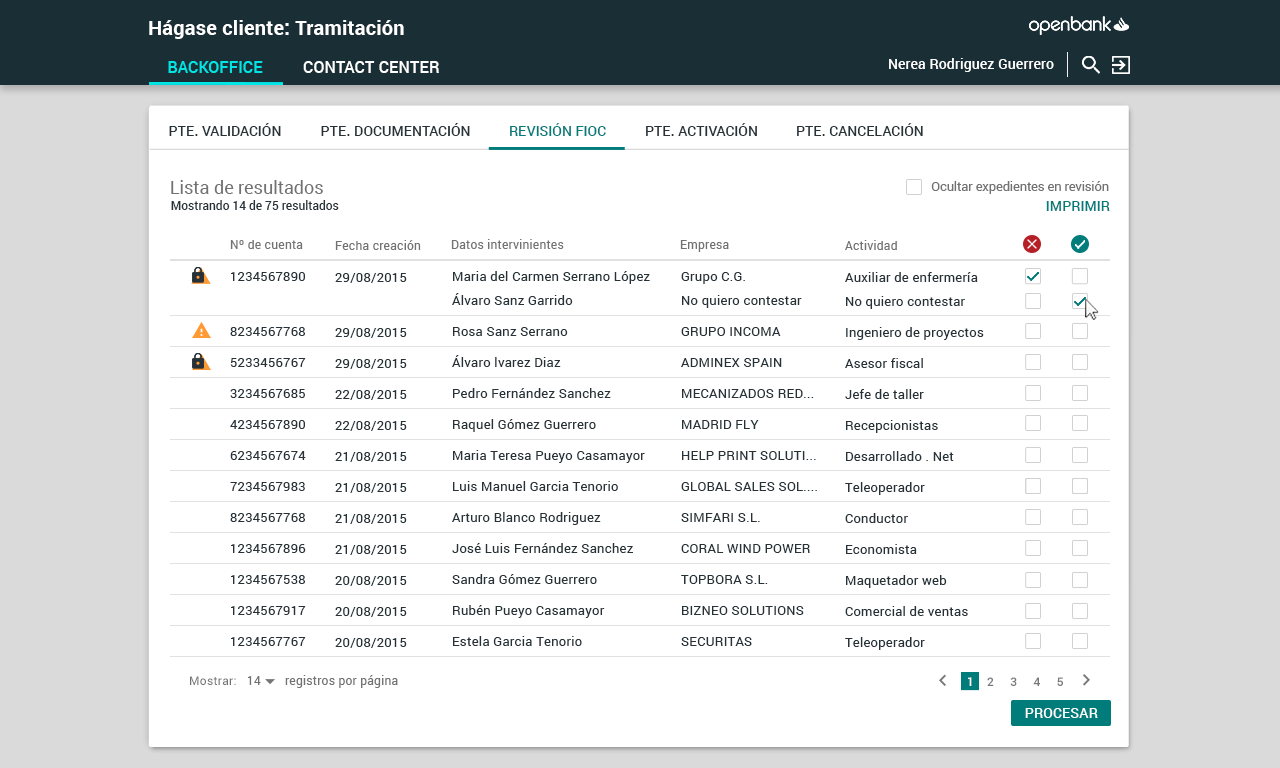
<style>
.page{position:relative;width:1280px;height:768px;background:#ffffff}
.page>*{position:absolute;margin:0}
.t1{font:20px "Roboto-Bold";letter-spacing:0.01em;color:#ffffff}
.t2{font:16px "Roboto-Medium";letter-spacing:0.01em;color:#00e6e6}
.t3{font:16px "Roboto-Medium";letter-spacing:0.01em;color:#ffffff}
.t4{font:14px "Roboto-Medium";letter-spacing:0.01em;color:#ffffff}
.t5{font:14px "Roboto-Medium";letter-spacing:0.01em;color:#263238}
.t6{font:14px "Roboto-Medium";letter-spacing:0.01em;color:#007c7b}
.t7{font:18px "Roboto-Regular";color:#727272}
.t8{font:13px "Roboto-Regular";color:#727272}
.t9{font:12px "Roboto-Medium";color:#263238}
.t10{font:14.2px "Roboto-Medium";letter-spacing:0.01em;color:#007c7b}
.t11{font:12px "Roboto-Regular";letter-spacing:0.02em;color:#727272}
.t12{font:13px/31px "Roboto-Regular";letter-spacing:0.02em;color:#263238}
.t13{font:13px/30.9px "Roboto-Regular";letter-spacing:0.02em;color:#263238}
.t14{font:13px/24px "Roboto-Regular";letter-spacing:0.02em;color:#263238}
.t15{font:13px/23.9px "Roboto-Regular";letter-spacing:0.02em;color:#263238}
.t16{font:12.1px "Roboto-Regular";letter-spacing:0.02em;color:#727272}
.t17{font:12.1px "Roboto-Medium";letter-spacing:0.02em;color:#76777a}
.t18{font:12.1px "Roboto-Medium";letter-spacing:0.02em;color:#ffffff}
</style>
<div class="page">
<p class="t1" style="left:149px;top:20px;width:255px;height:19px">Hágase cliente: Tramitación</p>
<p class="t2" style="left:168px;top:61px;width:95px;height:12px">BACKOFFICE</p>
<p class="t3" style="left:303px;top:61px;width:136px;height:12px">CONTACT CENTER</p>
<p class="t4" style="left:889px;top:58px;width:165px;height:14px">Nerea Rodriguez Guerrero</p>
<p class="t5" style="left:169px;top:123px;width:112px;height:13px">PTE. VALIDACIÓN</p>
<p class="t5" style="left:321px;top:123px;width:149px;height:13px">PTE. DOCUMENTACIÓN</p>
<p class="t6" style="left:510px;top:123px;width:96px;height:13px">REVISIÓN FIOC</p>
<p class="t5" style="left:646px;top:123px;width:111px;height:13px">PTE. ACTIVACIÓN</p>
<p class="t5" style="left:797px;top:123px;width:126px;height:13px">PTE. CANCELACIÓN</p>
<p class="t7" style="left:171px;top:180px;width:152px;height:14px">Lista de resultados</p>
<p class="t8" style="left:931px;top:181px;width:178px;height:13px">Ocultar expedientes en revisión</p>
<p class="t9" style="left:171px;top:200px;width:168px;height:10px">Mostrando 14 de 75 resultados</p>
<p class="t10" style="left:1046px;top:201px;width:64px;height:10px">IMPRIMIR</p>
<p class="t11" style="left:230px;top:240px;width:73px;height:9px">Nº de cuenta</p>
<p class="t11" style="left:335px;top:240px;width:86px;height:10px">Fecha creación</p>
<p class="t11" style="left:451px;top:239px;width:113px;height:10px">Datos intervinientes</p>
<p class="t11" style="left:680px;top:240px;width:49px;height:12px">Empresa</p>
<p class="t11" style="left:845px;top:240px;width:52px;height:10px">Actividad</p>
<p class="t12" style="left:230px;top:272px;width:76px;height:374px">1234567890<br><br>8234567768<br>5233456767<br>3234567685<br>4234567890<br>6234567674<br>7234567983<br>8234567768<br>1234567896<br>1234567538<br>1234567917<br>1234567767</p>
<p class="t12" style="left:335px;top:273px;width:72px;height:375px"><span class="t13">29/08/2015  <br> </span><br>29/08/2015  <br>29/08/2015  <br>22/08/2015 <br>22/08/2015 <br>21/08/2015 <br>21/08/2015 <br>21/08/2015  <br>21/08/2015 <br>20/08/2015 <br>20/08/2015 <br>20/08/2015</p>
<p class="t12" style="left:452px;top:271px;width:198px;height:375px"><span class="t14">Maria del Carmen </span><span class="t14">Serrano López<br></span><span class="t14">Álvaro </span><span class="t14">Sanz Garrido<br></span>Rosa Sanz Serrano<br>Álvaro lvarez Diaz<br>Pedro Fernández Sanchez<br>Raquel Gómez Guerrero<br>Maria Teresa Pueyo Casamayor<br>Luis Manuel Garcia Tenorio<br>Arturo Blanco Rodriguez<br>José Luis Fernández Sanchez<br>Sandra Gómez Guerrero<br>Rubén Pueyo Casamayor<br>Estela Garcia Tenorio</p>
<p class="t12" style="left:681px;top:272px;width:136px;height:374px"><span class="t14">Grupo C.G.<br>No quiero contestar<br></span>GRUPO INCOMA<br>ADMINEX SPAIN<br>MECANIZADOS RED...<br>MADRID FLY<br>HELP PRINT SOLUTI...<br>GLOBAL SALES SOL....<br>SIMFARI S.L.<br>CORAL WIND POWER<br>TOPBORA S.L.<br>BIZNEO SOLUTIONS<br>SECURITAS</p>
<p class="t12" style="left:845px;top:272px;width:139px;height:378px"><span class="t14">Auxiliar de enfermería<br></span><span class="t15">No quiero contestar<br></span>Ingeniero de proyectos<br>Asesor fiscal<br>Jefe de taller<br>Recepcionistas<br>Desarrollado . Net<br>Teleoperador<br>Conductor<br>Economista<br>Maquetador web<br>Comercial de ventas<br>Teleoperador</p>
<p class="t16" style="left:190px;top:676px;width:46px;height:9px">Mostrar:</p>
<p class="t11" style="left:248px;top:676px;width:13px;height:9px">14</p>
<p class="t16" style="left:285px;top:675px;width:113px;height:13px">registros por página</p>
<p class="t17" style="left:968px;top:677px;width:95px;height:9px"><span class="t18">1   </span> 2     3     4     5</p>
<p class="t4" style="left:1025px;top:708px;width:73px;height:10px">PROCESAR</p>
</div>
